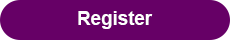
<style>
.page{position:relative;width:230px;height:40px;background:#660066}
.page>*{position:absolute;margin:0}
.t1{font:18.8px "Arial-BoldMT";color:#ffffff}
</style>
<div class="page">
<p class="t1" style="left:78px;top:11px;width:75px;height:18px">Register</p>
</div>
